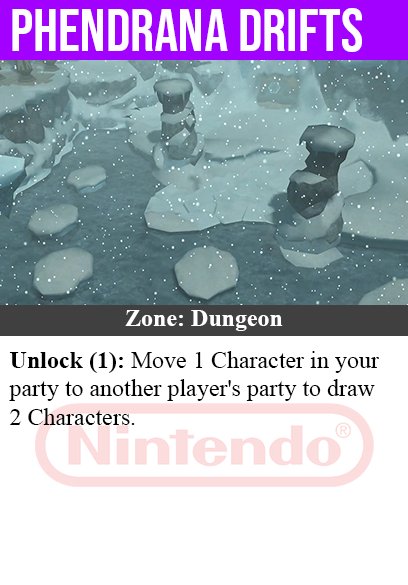
<style>
.page{position:relative;width:408px;height:585px;background:#ffffff}
.page>*{position:absolute;margin:0}
.t1{font:60px "BebasNeue-Regular";color:#ffffff}
.t2{font:24px "TimesNewRomanPS-BoldMT";color:#ffffff}
.t3{font:24px "TimesNewRomanPSMT";color:#000000}
.t4{font:24px "TimesNewRomanPS-BoldMT";color:#000000}
</style>
<div class="page">
<p class="t1" style="left:12px;top:8px;width:350px;height:44px">phendrana drifts</p>
<p class="t2" style="left:125px;top:310px;width:158px;height:21px">Zone: Dungeon</p>
<p class="t3" style="left:9px;top:351px;width:370px;height:74px"><span class="t4">Unlock (1):</span> Move 1 Character in your<br>party to another player's party to draw<br>2 Characters.</p>
</div>
